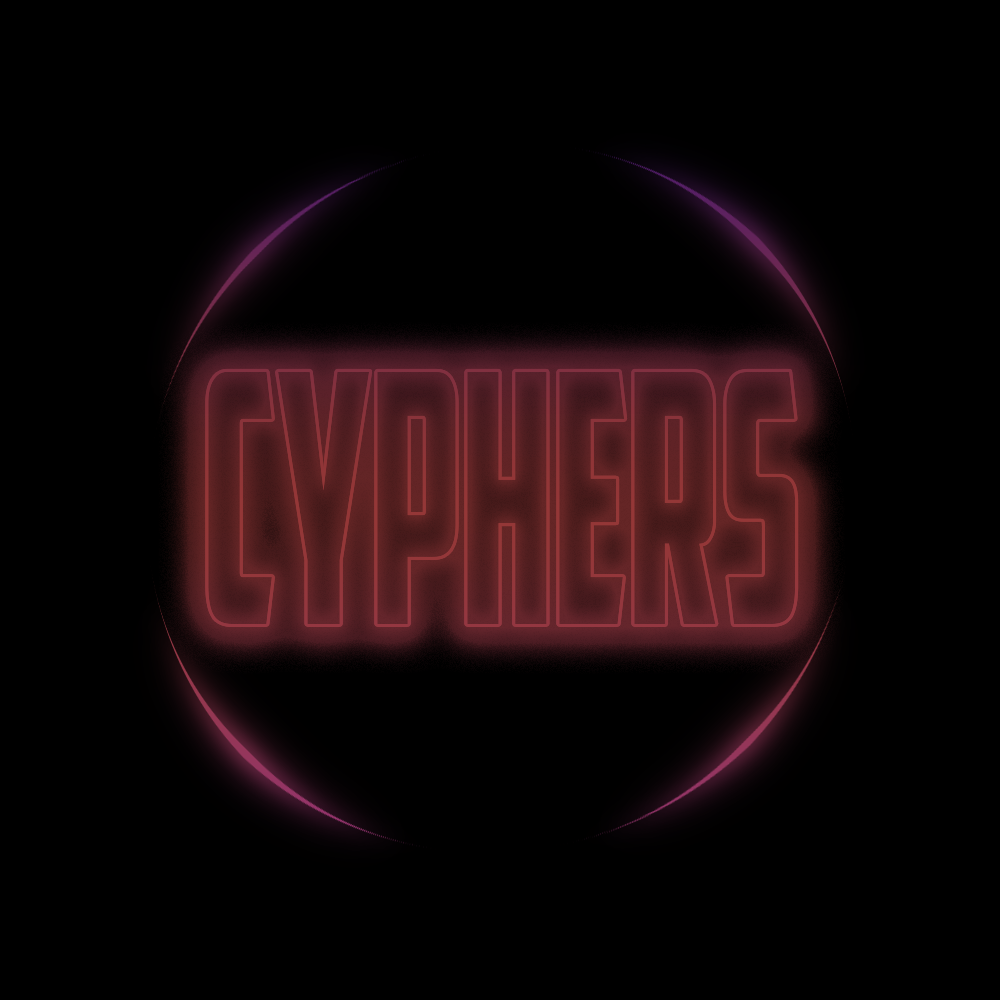
<style>
.page{position:relative;width:1000px;height:1000px;background:#000000}
.page>*{position:absolute;margin:0}
.t1{font:347.5px "AmericanCaptain";color:#541f22;scale:0.61 1}
</style>
<div class="page">
<p class="t1" style="left:208px;top:371px;width:588px;height:253px">CYPHERS</p>
<p class="t1" style="left:208px;top:371px;width:588px;height:253px">CYPHERS</p>
</div>
